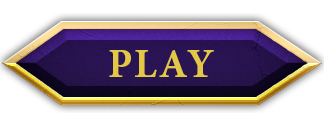
<style>
.page{position:relative;width:324px;height:113px;background:#ffffff}
.page>*{position:absolute;margin:0}
.t1{font:41px "MinionPro-Bold";letter-spacing:0.042em;color:#e3c746}
</style>
<div class="page">
<p class="t1" style="left:109px;top:50px;width:105px;height:27px">PLAY</p>
</div>
